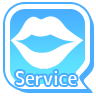
<style>
.page{position:relative;width:96px;height:96px;background:#ffffff}
.page>*{position:absolute;margin:0}
.t1{font:18px "JK-Gothic-M";color:#ffffff}
</style>
<div class="page">
<p class="t1" style="left:15px;top:71px;width:62px;height:15px">Service</p>
</div>
